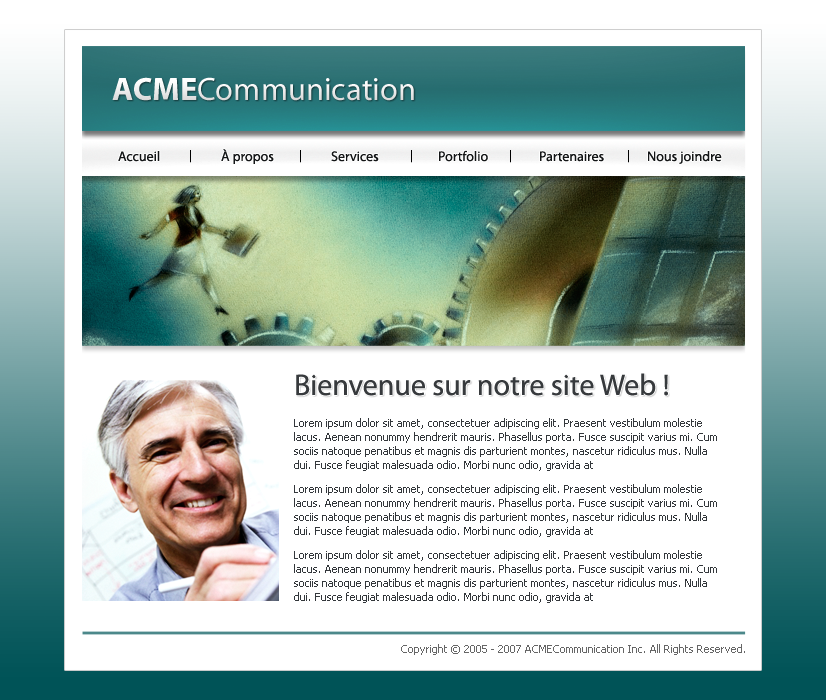
<style>
.page{position:relative;width:826px;height:700px;background:#ffffff}
.page>*{position:absolute;margin:0}
.t1{font:32.6px "MyriadPro-Regular";color:#ffffff}
.t2{font:32.6px "MyriadPro-Bold";color:#ffffff}
.t3{font:12px "MyriadPro-Regular";color:#000000}
.t4{font:14px "MyriadPro-Regular";color:#131516}
.t5{font:30px "MyriadPro-Regular";color:#373a3d}
.t6{font:11px/14px "Tahoma";color:#33373b}
.t7{font:11px "Tahoma";color:#666666}
</style>
<div class="page">
<p class="t1" style="left:112px;top:77px;width:302px;height:24px"><span class="t2">ACME</span>Communication</p>
<p class="t3" style="left:190px;top:150px;width:1px;height:13px">|</p>
<p class="t4" style="left:221px;top:149px;width:53px;height:15px">À propos</p>
<p class="t3" style="left:300px;top:150px;width:1px;height:13px">|</p>
<p class="t3" style="left:411px;top:150px;width:1px;height:13px">|</p>
<p class="t4" style="left:439px;top:150px;width:49px;height:12px">Portfolio</p>
<p class="t3" style="left:510px;top:150px;width:1px;height:13px">|</p>
<p class="t3" style="left:628px;top:150px;width:1px;height:13px">|</p>
<p class="t4" style="left:118px;top:151px;width:42px;height:11px">Accueil</p>
<p class="t4" style="left:331px;top:151px;width:48px;height:11px">Services</p>
<p class="t4" style="left:540px;top:151px;width:64px;height:11px">Partenaires</p>
<p class="t4" style="left:648px;top:151px;width:74px;height:13px">Nous joindre</p>
<p class="t5" style="left:296px;top:373px;width:372px;height:23px">Bienvenue sur notre site Web !</p>
<p class="t6" style="left:294px;top:418px;width:423px;height:53px">Lorem ipsum dolor sit amet, consectetuer adipiscing elit. Praesent vestibulum molestie lacus. Aenean nonummy hendrerit mauris. Phasellus porta. Fusce suscipit varius mi. Cum sociis natoque penatibus et magnis dis parturient montes, nascetur ridiculus mus. Nulla dui. Fusce feugiat malesuada odio. Morbi nunc odio, gravida at</p>
<p class="t6" style="left:294px;top:484px;width:423px;height:53px">Lorem ipsum dolor sit amet, consectetuer adipiscing elit. Praesent vestibulum molestie lacus. Aenean nonummy hendrerit mauris. Phasellus porta. Fusce suscipit varius mi. Cum sociis natoque penatibus et magnis dis parturient montes, nascetur ridiculus mus. Nulla dui. Fusce feugiat malesuada odio. Morbi nunc odio, gravida at</p>
<p class="t6" style="left:294px;top:550px;width:423px;height:53px">Lorem ipsum dolor sit amet, consectetuer adipiscing elit. Praesent vestibulum molestie lacus. Aenean nonummy hendrerit mauris. Phasellus porta. Fusce suscipit varius mi. Cum sociis natoque penatibus et magnis dis parturient montes, nascetur ridiculus mus. Nulla dui. Fusce feugiat malesuada odio. Morbi nunc odio, gravida at</p>
<p class="t7" style="left:401px;top:644px;width:344px;height:11px">Copyright © 2005 - 2007 ACMECommunication Inc. All Rights Reserved.</p>
</div>
